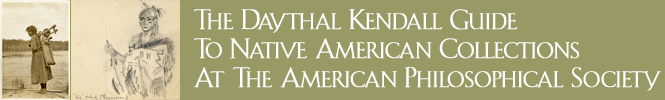
<style>
.page{position:relative;width:665px;height:100px;background:#999966}
.page>*{position:absolute;margin:0}
.t1{font:23.9px "BauerTextInitials";color:#ffffff;font-weight:bold}
</style>
<div class="page">
<p class="t1" style="left:194px;top:9px;width:467px;height:82px">The Daythal Kendall Guide <br>To Native American Collections <br>At The American Philosophical Society</p>
</div>
